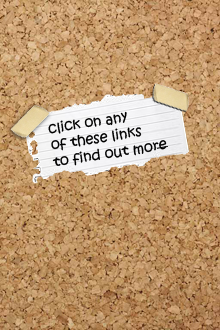
<style>
.page{position:relative;width:220px;height:330px}
.page>*{position:absolute;margin:0}
.t1{font:14px "KristenITC-Regular";color:#000000}
</style>
<div class="page">
<p class="t1" style="left:48px;top:111px;width:119px;height:55px;rotate:-9deg">click on any <br>of these links <br>to find out more</p>
</div>
